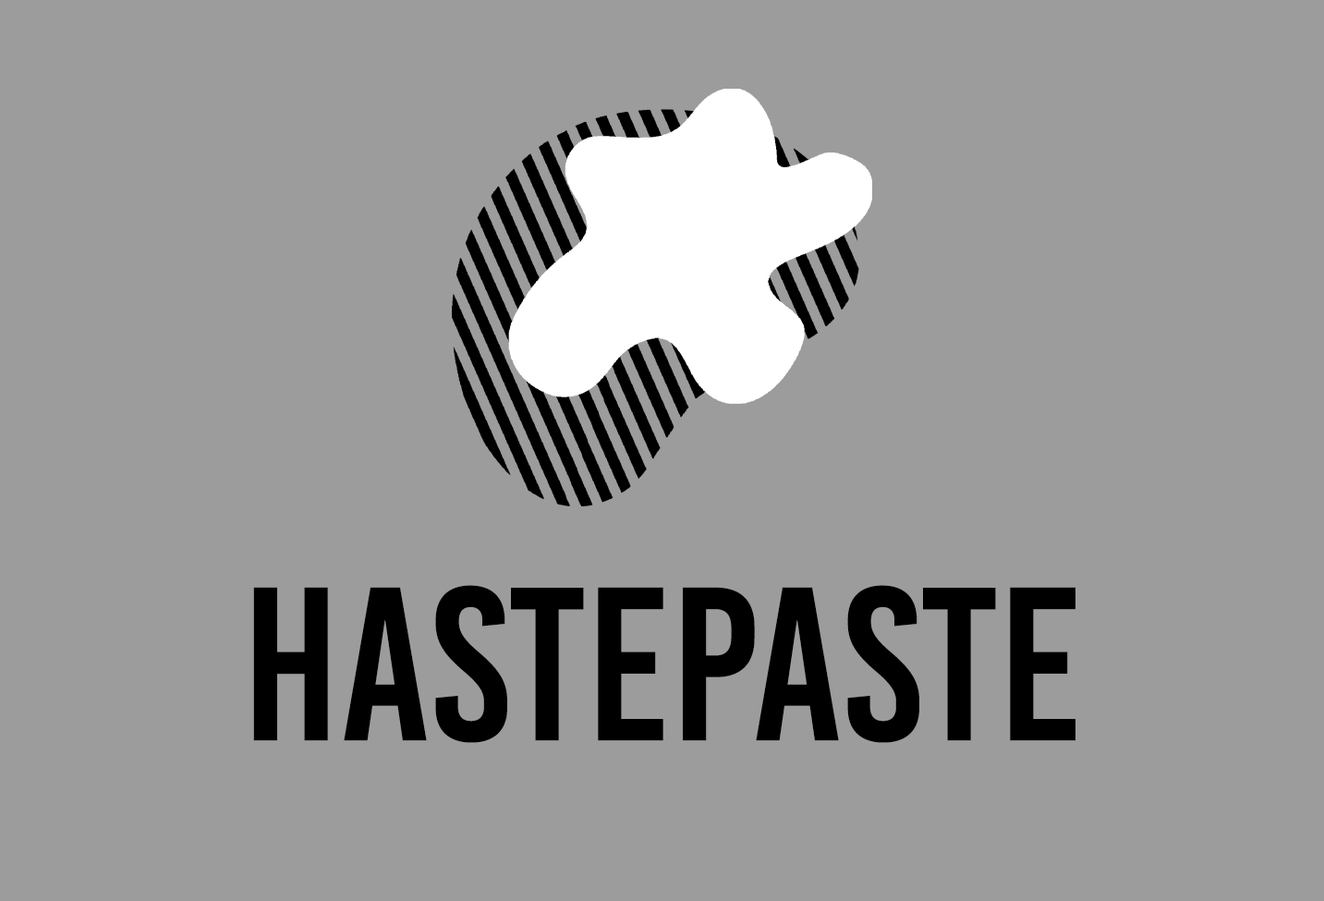
<style>
.page{position:relative;width:1324px;height:901px;background:#9c9c9c}
.page>*{position:absolute;margin:0}
.t1{font:218px "BebasKai";color:#000000}
</style>
<div class="page">
<p class="t1" style="left:253px;top:585px;width:822px;height:158px">hastepaste</p>
</div>
